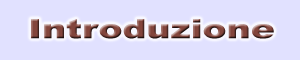
<style>
.page{position:relative;width:300px;height:60px;background:#e1e1ff}
.page>*{position:absolute;margin:0}
.t1{font:27px "Arial-Black";scale:1.33 1}
</style>
<div class="page">
<p class="t1" style="left:31px;top:19px;width:243px;height:20px">Introduzione</p>
</div>
